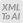
<style>
.page{position:relative;width:23px;height:23px;background:#e6e6e6}
.page>*{position:absolute;margin:0}
.t1{font:9px/9px "Lato-BlackItalic";letter-spacing:-0.025em;color:#9a9999}
</style>
<div class="page">
<p class="t1" style="left:1px;top:4px;width:19px;height:16px;text-align:center">XML<br>To AI</p>
</div>
